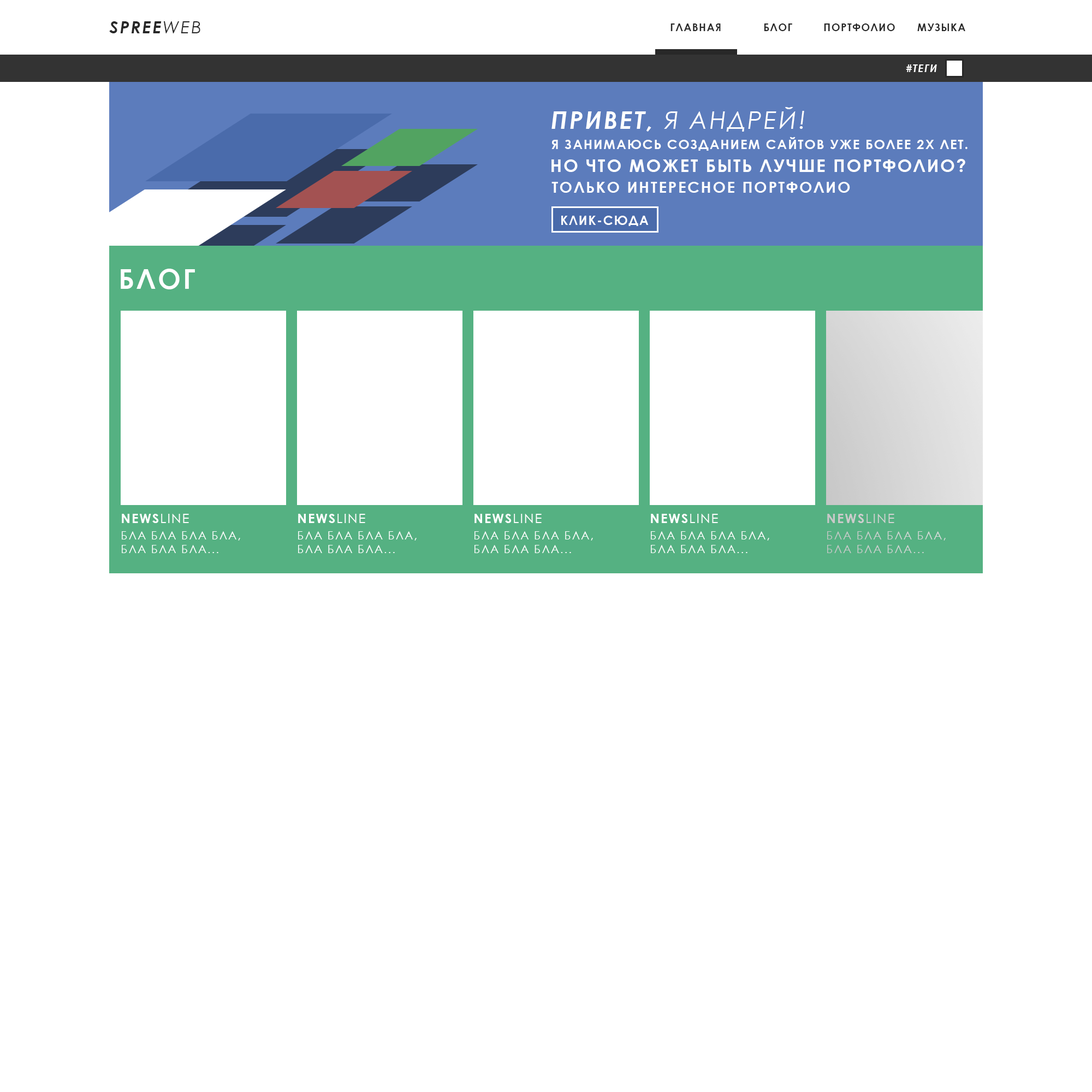
<style>
.page{position:relative;width:1092px;height:1092px;background:#ffffff}
.page>*{position:absolute;margin:0}
.t1{font:17px "CenturyGothic-BoldItalic";letter-spacing:0.09em;color:#282828;text-transform:uppercase}
.t2{font:17px "CenturyGothic-Italic";letter-spacing:0.09em;color:#282828;text-transform:uppercase}
.t3{font:10.2px "CenturyGothic-Bold";letter-spacing:0.09em;color:#282828;text-transform:uppercase}
.t4{font:10.2px "CenturyGothic-BoldItalic";letter-spacing:0.09em;color:#ffffff;text-transform:uppercase}
.t5{font:24px "CenturyGothic-Italic";letter-spacing:0.09em;color:#ffffff;text-transform:uppercase}
.t6{font:24px "CenturyGothic-BoldItalic";letter-spacing:0.09em;color:#ffffff;text-transform:uppercase}
.t7{font:12.9px "CenturyGothic-Bold";letter-spacing:0.09em;color:#ffffff;text-transform:uppercase}
.t8{font:17.3px "CenturyGothic-Bold";letter-spacing:0.09em;color:#ffffff;text-transform:uppercase}
.t9{font:15.4px "CenturyGothic-Bold";letter-spacing:0.09em;color:#ffffff;text-transform:uppercase}
.t10{font:12.3px "CenturyGothic-Bold";letter-spacing:0.09em;color:#ffffff;text-transform:uppercase}
.t11{font:27.1px "CenturyGothic-Bold";letter-spacing:0.09em;color:#ffffff;text-transform:uppercase}
.t12{font:12.9px "CenturyGothic";letter-spacing:0.09em;color:#ffffff;text-transform:uppercase}
.t13{font:12.9px "CenturyGothic-Bold";letter-spacing:0.09em;color:#cbcbcb;text-transform:uppercase}
.t14{font:12.9px "CenturyGothic";letter-spacing:0.09em;color:#cbcbcb;text-transform:uppercase}
.t15{font:11.4px "CenturyGothic";letter-spacing:0.09em;color:#ffffff;text-transform:uppercase}
.t16{font:11.4px "CenturyGothic";letter-spacing:0.09em;color:#d0d0d0;text-transform:uppercase}
</style>
<div class="page">
<p class="t1" style="left:109px;top:21px;width:91px;height:12px">SPREE<span class="t2">WEB</span></p>
<p class="t3" style="left:670px;top:23px;width:51px;height:8px">ГЛАВНАЯ</p>
<p class="t3" style="left:764px;top:23px;width:28px;height:8px">БЛОГ</p>
<p class="t3" style="left:824px;top:23px;width:71px;height:8px">ПОРТФОЛИО</p>
<p class="t3" style="left:917px;top:23px;width:48px;height:8px">МУЗЫКА</p>
<p class="t4" style="left:906px;top:64px;width:31px;height:8px">#ТЕГИ</p>
<p class="t5" style="left:551px;top:107px;width:253px;height:25px"><span class="t6">ПРИВЕТ, </span>Я АНДРЕЙ!</p>
<p class="t7" style="left:551px;top:137px;width:416px;height:14px">Я ЗАНИМАЮСЬ СОЗДАНИЕМ САЙТОВ УЖЕ БОЛЕЕ 2х ЛЕТ.</p>
<p class="t8" style="left:551px;top:159px;width:414px;height:13px">НО ЧТО МОЖЕТ БЫТЬ ЛУЧШЕ ПОРТФОЛИО?</p>
<p class="t9" style="left:551px;top:182px;width:299px;height:11px">ТОЛЬКО ИНТЕРЕСНОЕ ПОРТФОЛИО</p>
<p class="t10" style="left:561px;top:216px;width:88px;height:10px">КЛИК-СЮДА</p>
<p class="t11" style="left:121px;top:269px;width:74px;height:20px">БЛОГ</p>
<p class="t7" style="left:122px;top:514px;width:67px;height:9px">NEWS<span class="t12">LINE</span></p>
<p class="t7" style="left:298px;top:514px;width:67px;height:9px">NEWS<span class="t12">LINE</span></p>
<p class="t7" style="left:474px;top:514px;width:68px;height:9px">NEWS<span class="t12">LINE</span></p>
<p class="t7" style="left:651px;top:514px;width:67px;height:9px">NEWS<span class="t12">LINE</span></p>
<p class="t13" style="left:827px;top:514px;width:67px;height:9px">NEWS<span class="t14">LINE</span></p>
<p class="t15" style="left:122px;top:531px;width:118px;height:22px">бЛА БЛА бЛА бЛА,<br>БЛА БЛА БЛА...</p>
<p class="t15" style="left:298px;top:531px;width:119px;height:22px">бЛА БЛА бЛА бЛА,<br>БЛА БЛА БЛА...</p>
<p class="t15" style="left:474px;top:531px;width:119px;height:22px">бЛА БЛА бЛА бЛА,<br>БЛА БЛА БЛА...</p>
<p class="t15" style="left:651px;top:531px;width:118px;height:22px">бЛА БЛА бЛА бЛА,<br>БЛА БЛА БЛА...</p>
<p class="t16" style="left:827px;top:531px;width:119px;height:22px">бЛА БЛА бЛА бЛА,<br>БЛА БЛА БЛА...</p>
</div>
